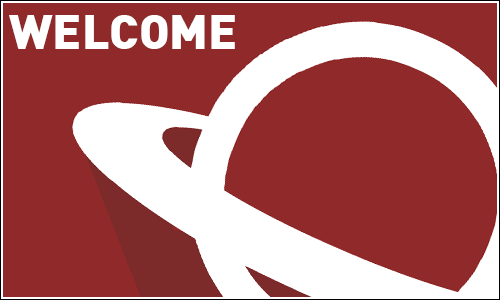
<style>
.page{position:relative;width:500px;height:300px;background:#902a2a}
.page>*{position:absolute;margin:0}
.t1{font:48px "DIN-Black";color:#ffffff}
</style>
<div class="page">
<p class="t1" style="left:9px;top:15px;width:226px;height:34px">WELCOME</p>
</div>
